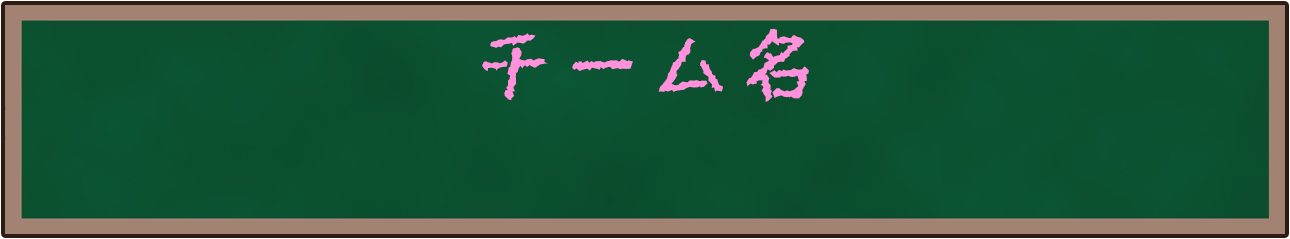
<style>
.page{position:relative;width:1290px;height:239px}
.page>*{position:absolute;margin:0}
.t1{font:83.3px "Chalk-S-JP";letter-spacing:0.06em;color:#ff91dd}
</style>
<div class="page">
<p class="t1" style="left:482px;top:28px;width:327px;height:74px">チーム名</p>
</div>
